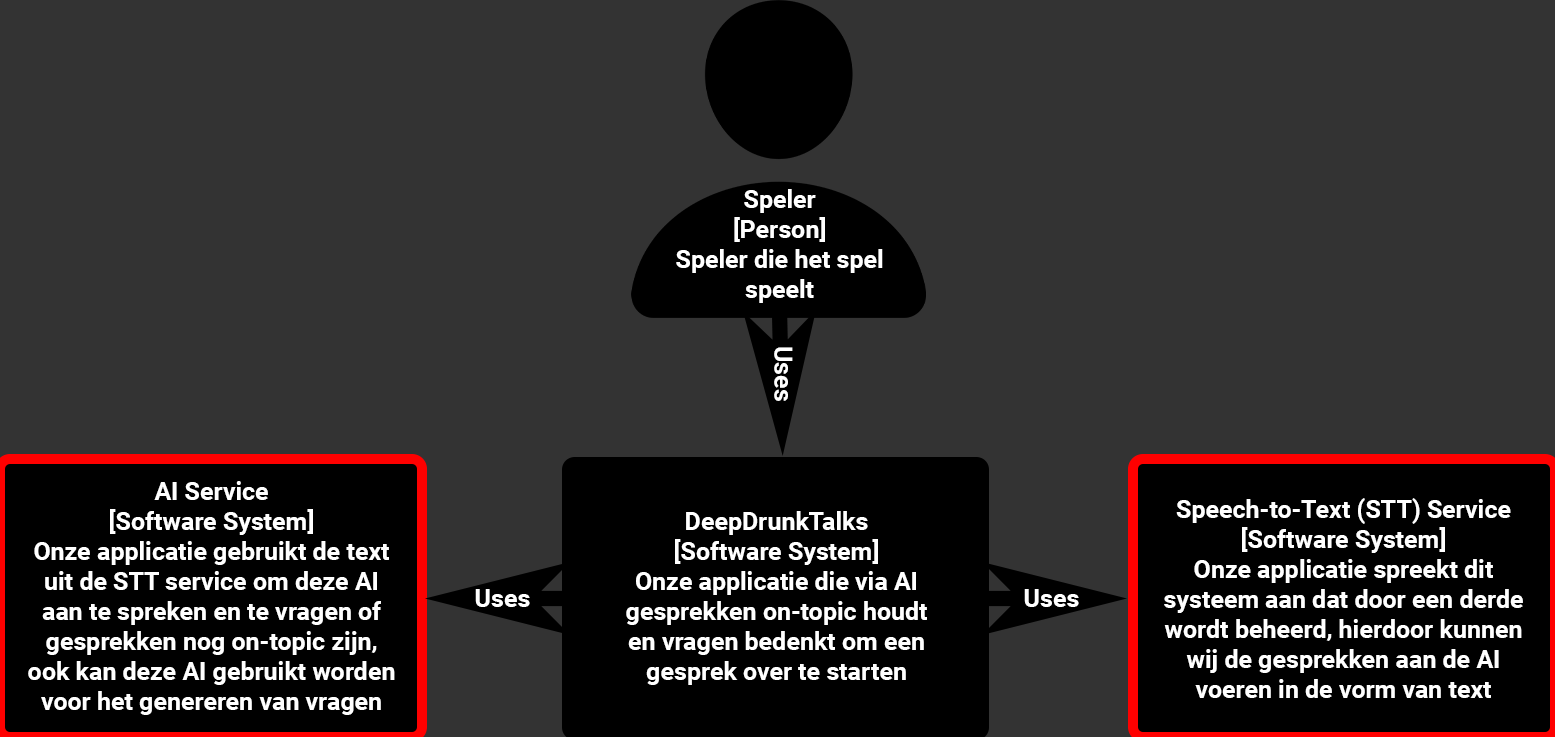
<style>
.page{position:relative;width:1555px;height:737px;background:#333333}
.page>*{position:absolute;margin:0}
.t1{font:25px "Roboto-Bold";color:#ffffff}
</style>
<div class="page">
<p class="t1" style="left:676px;top:189px;width:207px;height:114px;text-align:center">Speler<br>[Person]<br>Speler die het spel<br>speelt</p>
<p class="t1" style="left:774px;top:347px;width:19px;height:54px;rotate:90deg">Uses</p>
<p class="t1" style="left:28px;top:481px;width:367px;height:234px;text-align:center">AI Service<br>[Software System]<br>Onze applicatie gebruikt de text<br>uit de STT service om deze AI<br>aan te spreken en te vragen of<br>gesprekken nog on-topic zijn,<br>ook kan deze AI gebruikt worden<br>voor het genereren van vragen</p>
<p class="t1" style="left:1164px;top:498px;width:359px;height:200px;text-align:center">Speech-to-Text (STT) Service<br>[Software System]<br>Onze applicatie spreekt dit<br>systeem aan dat door een derde<br>wordt beheerd, hierdoor kunnen<br>wij de gesprekken aan de AI<br>voeren in de vorm van text</p>
<p class="t1" style="left:626px;top:511px;width:301px;height:174px;text-align:center">DeepDrunkTalks<br>[Software System]<br>Onze applicatie die via AI<br>gesprekken on-topic houdt<br>en vragen bedenkt om een<br>gesprek over te starten</p>
<p class="t1" style="left:475px;top:589px;width:55px;height:18px">Uses</p>
<p class="t1" style="left:1024px;top:589px;width:55px;height:18px">Uses</p>
</div>
